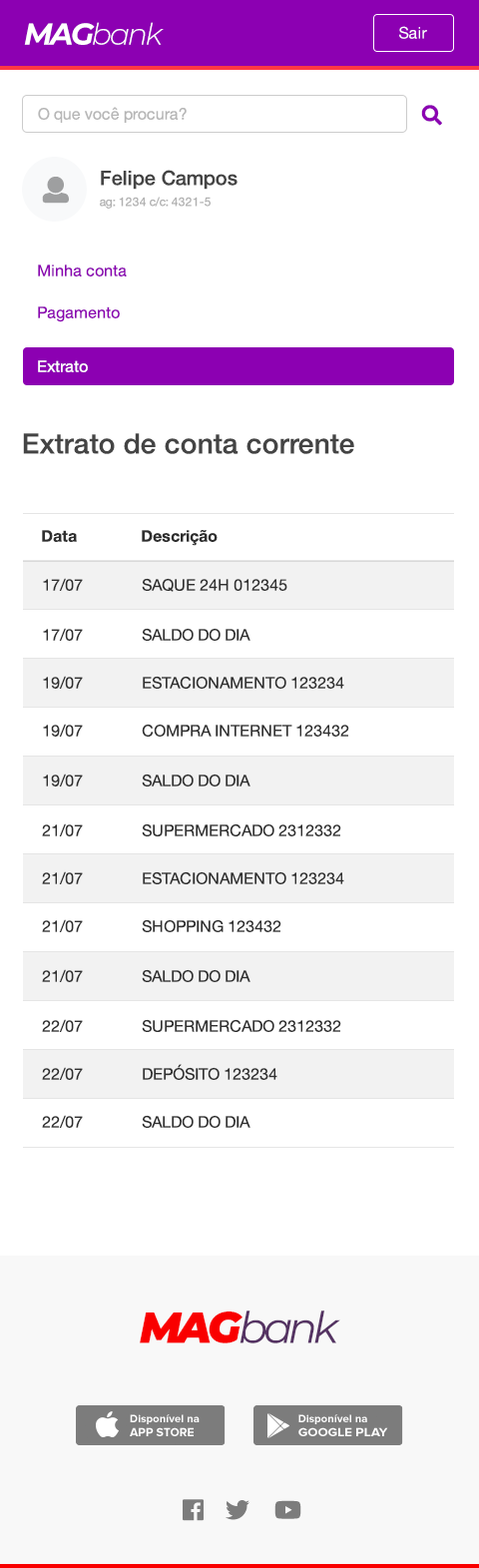
<style>
.page{position:relative;width:479px;height:1568px;background:#ffffff}
.page>*{position:absolute;margin:0}
.t1{font:29.9px "Montserrat-LightItalic";letter-spacing:-0.075em;color:#ffffff}
.t2{font:29.9px "Montserrat-BoldItalic";letter-spacing:-0.075em;color:#ffffff}
.t3{font:16px "HelveticaNeue";color:#ffffff}
.t4{font:16px "HelveticaNeue";color:#b6b6b6}
.t5{font:20px "HelveticaNeue-Medium";color:#444444}
.t6{font:12px "HelveticaNeue";color:#b1b1b1}
.t7{font:16px "HelveticaNeue";color:#8c00b2}
.t8{font:27.9px "HelveticaNeue-Medium";color:#444444}
.t9{font:16px "HelveticaNeue-Bold";color:#2f2f2f}
.t10{font:16px "HelveticaNeue";color:#2f2f2f}
.t11{font:43.3px "Montserrat-Italic";letter-spacing:-0.075em;color:#553363}
.t12{font:43.3px "Montserrat-BlackItalic";letter-spacing:-0.075em;color:#f90000}
</style>
<div class="page">
<p class="t1" style="left:24px;top:22px;width:140px;height:23px"><span class="t2">MAG</span>bank</p>
<p class="t3" style="left:399px;top:26px;width:28px;height:13px">Sair</p>
<p class="t4" style="left:38px;top:107px;width:149px;height:16px">O que você procura?</p>
<p class="t5" style="left:101px;top:170px;width:137px;height:20px">Felipe Campos</p>
<p class="t6" style="left:100px;top:197px;width:111px;height:12px">ag: 1234 c/c: 4321-5</p>
<p class="t7" style="left:38px;top:264px;width:89px;height:12px">Minha conta</p>
<p class="t7" style="left:38px;top:306px;width:82px;height:16px">Pagamento</p>
<p class="t3" style="left:38px;top:360px;width:50px;height:12px">Extrato</p>
<p class="t8" style="left:23px;top:433px;width:331px;height:21px">Extrato de conta corrente</p>
<p class="t9" style="left:42px;top:530px;width:35px;height:12px">Data</p>
<p class="t9" style="left:142px;top:530px;width:76px;height:16px">Descrição</p>
<p class="t10" style="left:43px;top:578px;width:40px;height:13px">17/07</p>
<p class="t10" style="left:142px;top:578px;width:145px;height:14px">SAQUE 24H 012345</p>
<p class="t10" style="left:43px;top:628px;width:40px;height:13px">17/07</p>
<p class="t10" style="left:142px;top:628px;width:109px;height:13px">SALDO DO DIA</p>
<p class="t10" style="left:43px;top:676px;width:40px;height:13px">19/07</p>
<p class="t10" style="left:143px;top:676px;width:201px;height:13px">ESTACIONAMENTO 123234</p>
<p class="t10" style="left:43px;top:724px;width:40px;height:13px">19/07</p>
<p class="t10" style="left:142px;top:724px;width:207px;height:13px">COMPRA INTERNET 123432</p>
<p class="t10" style="left:43px;top:774px;width:40px;height:12px">19/07</p>
<p class="t10" style="left:142px;top:774px;width:109px;height:12px">SALDO DO DIA</p>
<p class="t10" style="left:42px;top:823px;width:41px;height:13px">21/07</p>
<p class="t10" style="left:142px;top:823px;width:199px;height:13px">SUPERMERCADO 2312332</p>
<p class="t10" style="left:42px;top:871px;width:41px;height:13px">21/07</p>
<p class="t10" style="left:143px;top:871px;width:201px;height:13px">ESTACIONAMENTO 123234</p>
<p class="t10" style="left:42px;top:919px;width:41px;height:13px">21/07</p>
<p class="t10" style="left:142px;top:919px;width:139px;height:13px">SHOPPING 123432</p>
<p class="t10" style="left:42px;top:969px;width:41px;height:13px">21/07</p>
<p class="t10" style="left:142px;top:969px;width:109px;height:13px">SALDO DO DIA</p>
<p class="t10" style="left:42px;top:1019px;width:41px;height:13px">22/07</p>
<p class="t10" style="left:142px;top:1019px;width:199px;height:13px">SUPERMERCADO 2312332</p>
<p class="t10" style="left:42px;top:1067px;width:41px;height:13px">22/07</p>
<p class="t10" style="left:143px;top:1064px;width:134px;height:16px">DEPÓSITO 123234</p>
<p class="t10" style="left:42px;top:1115px;width:41px;height:13px">22/07</p>
<p class="t10" style="left:142px;top:1115px;width:109px;height:13px">SALDO DO DIA</p>
<p class="t11" style="left:140px;top:1310px;width:200px;height:33px"><span class="t12">MAG</span>bank</p>
</div>
